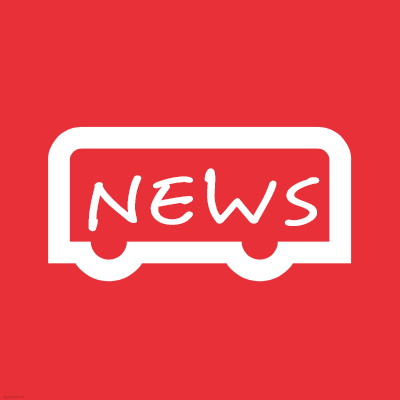
<style>
.page{position:relative;width:400px;height:400px;background:#e83038}
.page>*{position:absolute;margin:0}
.t1{font:66.7px "HanziPenSC-W5";letter-spacing:0.02em;color:#ffffff;scale:1.4 1}
</style>
<div class="page">
<p class="t1" style="left:88px;top:168px;width:232px;height:64px">NEWS</p>
</div>
